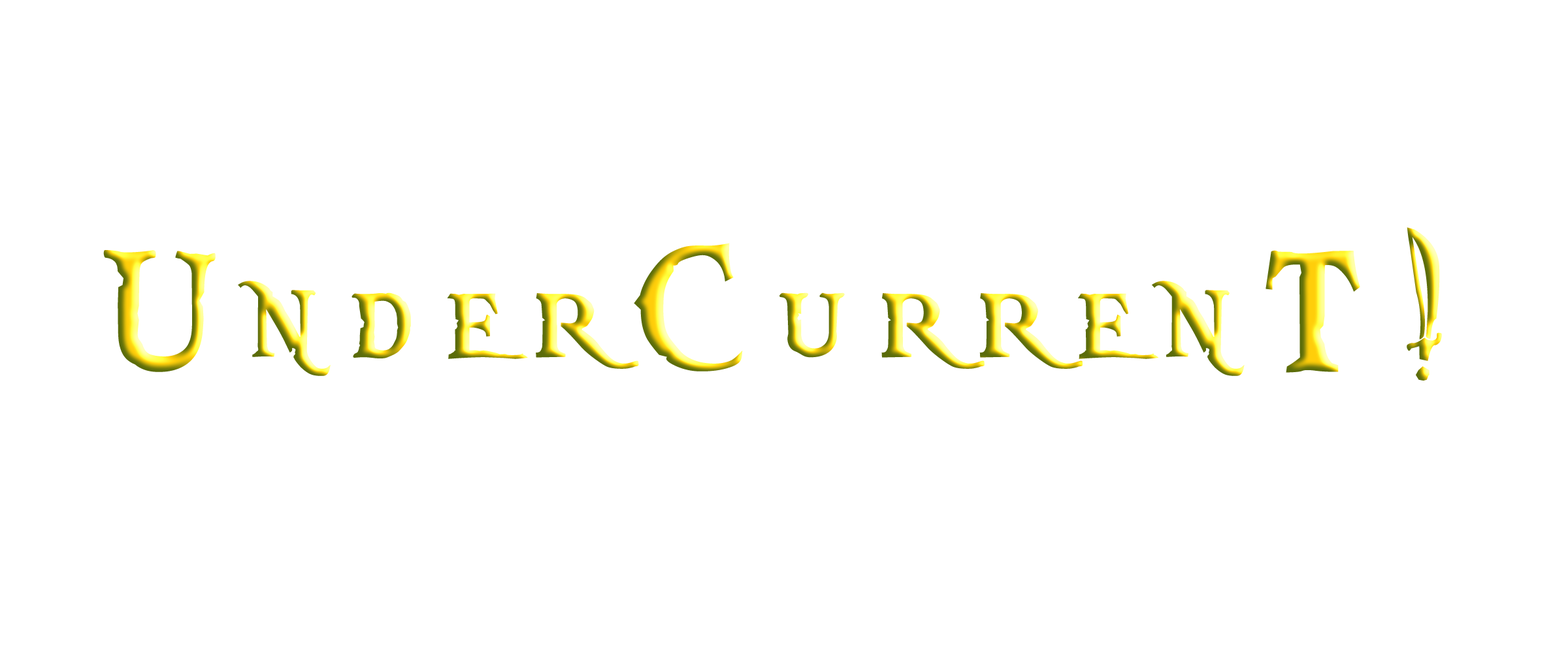
<style>
.page{position:relative;width:1568px;height:645px;background:#ffffff}
.page>*{position:absolute;margin:0}
.t1{font:182.7px "PiecesofEight";letter-spacing:0.18em}
</style>
<div class="page">
<p class="t1" style="left:103px;top:227px;width:1339px;height:154px">UnderCurrenT!</p>
</div>
